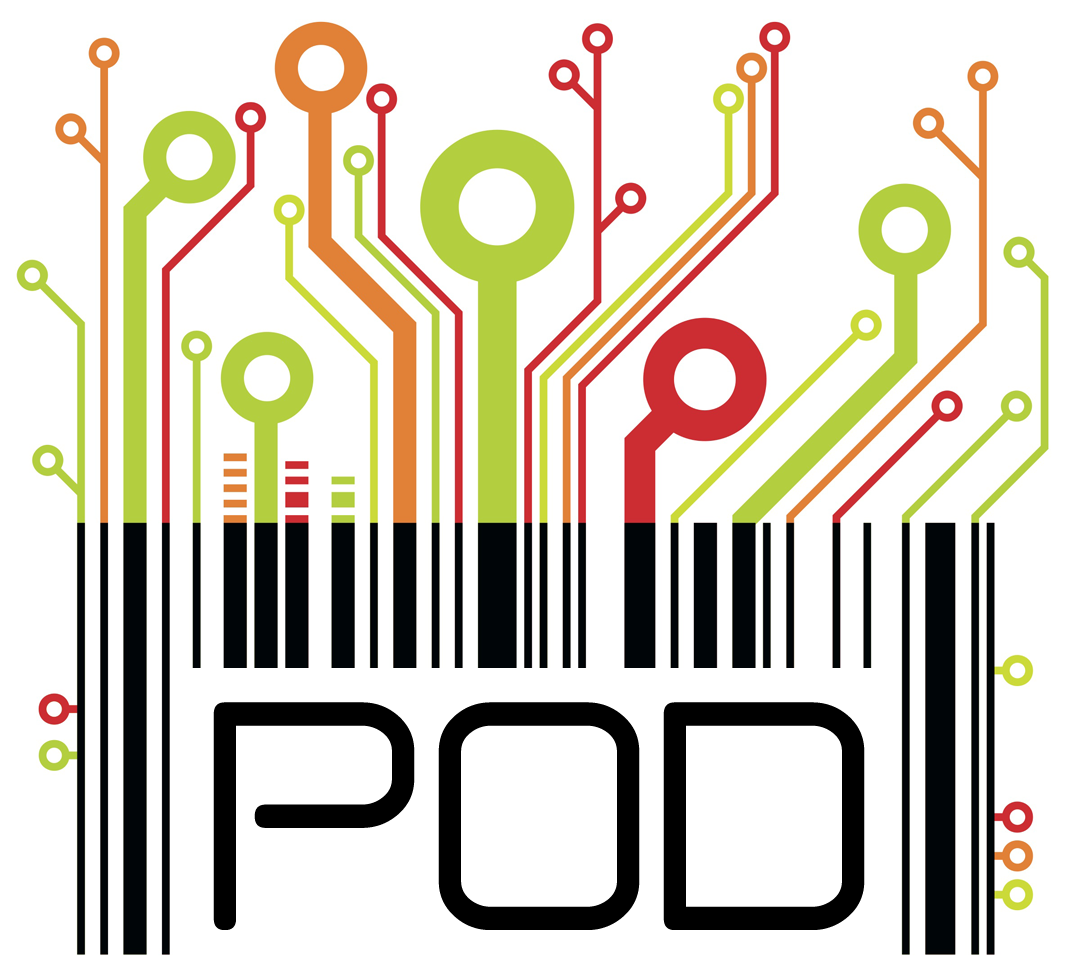
<style>
.page{position:relative;width:1080px;height:978px;background:#ffffff}
.page>*{position:absolute;margin:0}
.t1{font:401px "NPNaipolAllinOne-Bold";letter-spacing:-0.025em;color:#000000;scale:0.91 1}
</style>
<div class="page">
<p class="t1" style="left:213px;top:702px;width:652px;height:228px">POD</p>
</div>
